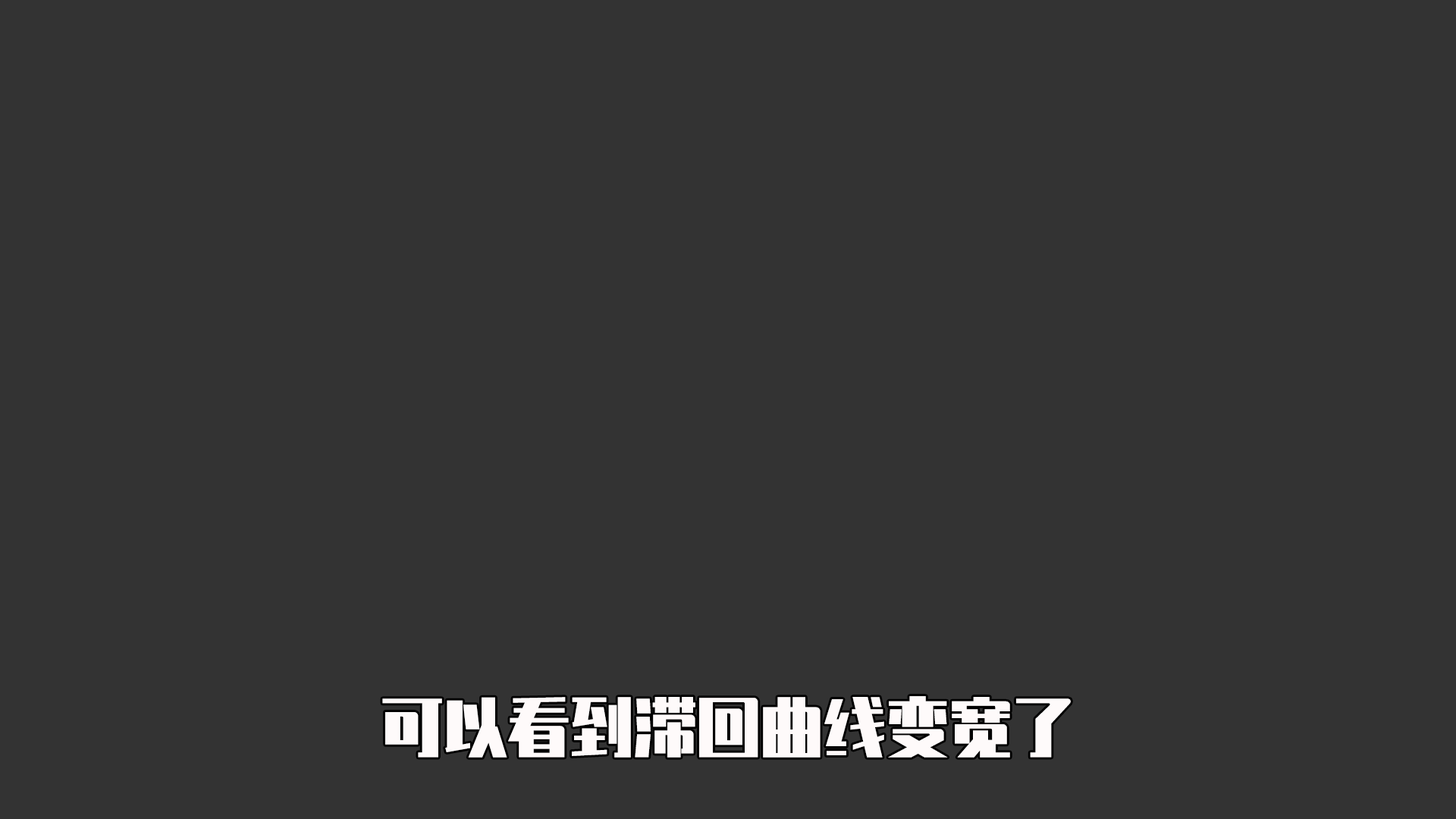
<style>
.page{position:relative;width:1456px;height:819px;background:#333333}
.page>*{position:absolute;margin:0}
.t1{font:63.2px "ZhenyanGB-Regular";color:#fefafa}
</style>
<div class="page">
<p class="t1" style="left:382px;top:696px;width:689px;height:62px">可以看到滞回曲线变宽了</p>
</div>
